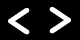
<style>
.page{position:relative;width:80px;height:40px;background:#000000}
.page>*{position:absolute;margin:0}
.t1{font:37.5px "OCRAStd";color:#ffffff;font-weight:bold}
</style>
<div class="page">
<p class="t1" style="left:8px;top:8px;width:22px;height:27px;rotate:180deg">&gt;</p>
<p class="t1" style="left:49px;top:7px;width:22px;height:27px">&gt;</p>
</div>
